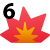
<style>
.page{position:relative;width:50px;height:50px;background:#ffffff}
.page>*{position:absolute;margin:0}
.t1{font:24px "MyriadHebrew-Bold";color:#000000}
</style>
<div class="page">
<p class="t1" style="left:3px;top:3px;width:12px;height:16px">6</p>
</div>
